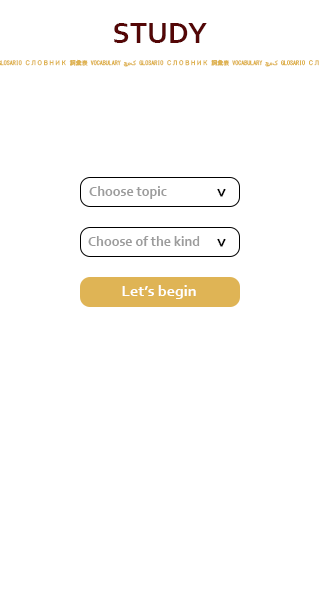
<style>
.page{position:relative;width:320px;height:600px;background:#ffffff}
.page>*{position:absolute;margin:0}
.t1{font:30px "Corbel-Bold";color:#540606}
.t2{font:14px "Corbel-Bold";color:#9c9c9c}
.t3{font:18px "Corbel-Bold";color:#000000}
.t4{font:16px "Corbel-Bold";color:#ffffff}
</style>
<div class="page">
<p class="t1" style="left:114px;top:23px;width:93px;height:20px">STUDY</p>
<p class="t2" style="left:89px;top:186px;width:78px;height:13px">Choose topic</p>
<p class="t3" style="left:217px;top:188px;width:9px;height:9px;rotate:90deg">&gt;</p>
<p class="t2" style="left:88px;top:236px;width:112px;height:10px">Choose of the kind</p>
<p class="t3" style="left:217px;top:238px;width:9px;height:9px;rotate:90deg">&gt;</p>
<p class="t4" style="left:122px;top:285px;width:74px;height:14px">Let’s begin</p>
</div>
